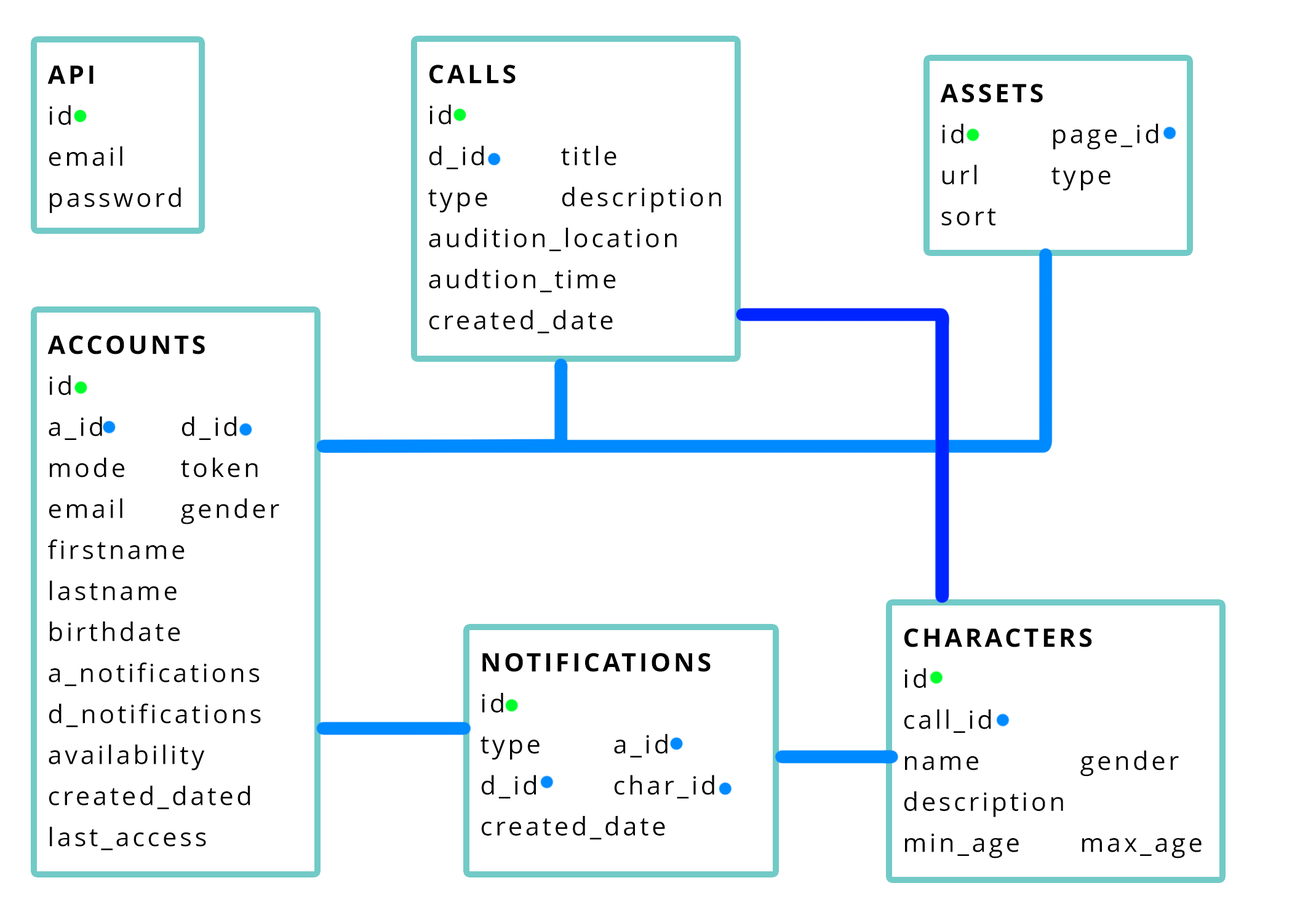
<style>
.page{position:relative;width:1292px;height:923px;background:#ffffff}
.page>*{position:absolute;margin:0}
.t1{font:25.6px/41px "OpenSans";letter-spacing:0.11em;color:#000000}
.t2{font:25.6px/41px "OpenSans-Bold";letter-spacing:0.11em;color:#000000}
</style>
<div class="page">
<p class="t1" style="left:47px;top:65px;width:134px;height:148px"><span class="t2">API<br></span>id<br>email<br>password</p>
<p class="t1" style="left:428px;top:65px;width:293px;height:268px"><span class="t2">CALLS<br></span>id<br>d_id    title<br>type    description<br>audition_location<br>audtion_time<br>created_date</p>
<p class="t1" style="left:940px;top:84px;width:219px;height:142px"><span class="t2">ASSETS<br></span>id    page_id<br>url    type<br>sort</p>
<p class="t1" style="left:47px;top:335px;width:232px;height:515px"><span class="t2">ACCOUNTS<br></span>id<br>a_id    d_id<br>mode   token<br>email   gender<br>firstname<br>lastname<br>birthdate<br>a_notifications<br>d_notifications<br>availability<br>created_dated<br>last_access</p>
<p class="t1" style="left:904px;top:628px;width:298px;height:230px"><span class="t2">CHARACTERS<br></span>id<br>call_id<br>name     gender<br>description<br>min_age   max_age</p>
<p class="t1" style="left:481px;top:653px;width:233px;height:187px"><span class="t2">NOTIFICATIONS<br></span>id<br>type    a_id<br>d_id    char_id<br>created_date</p>
</div>
